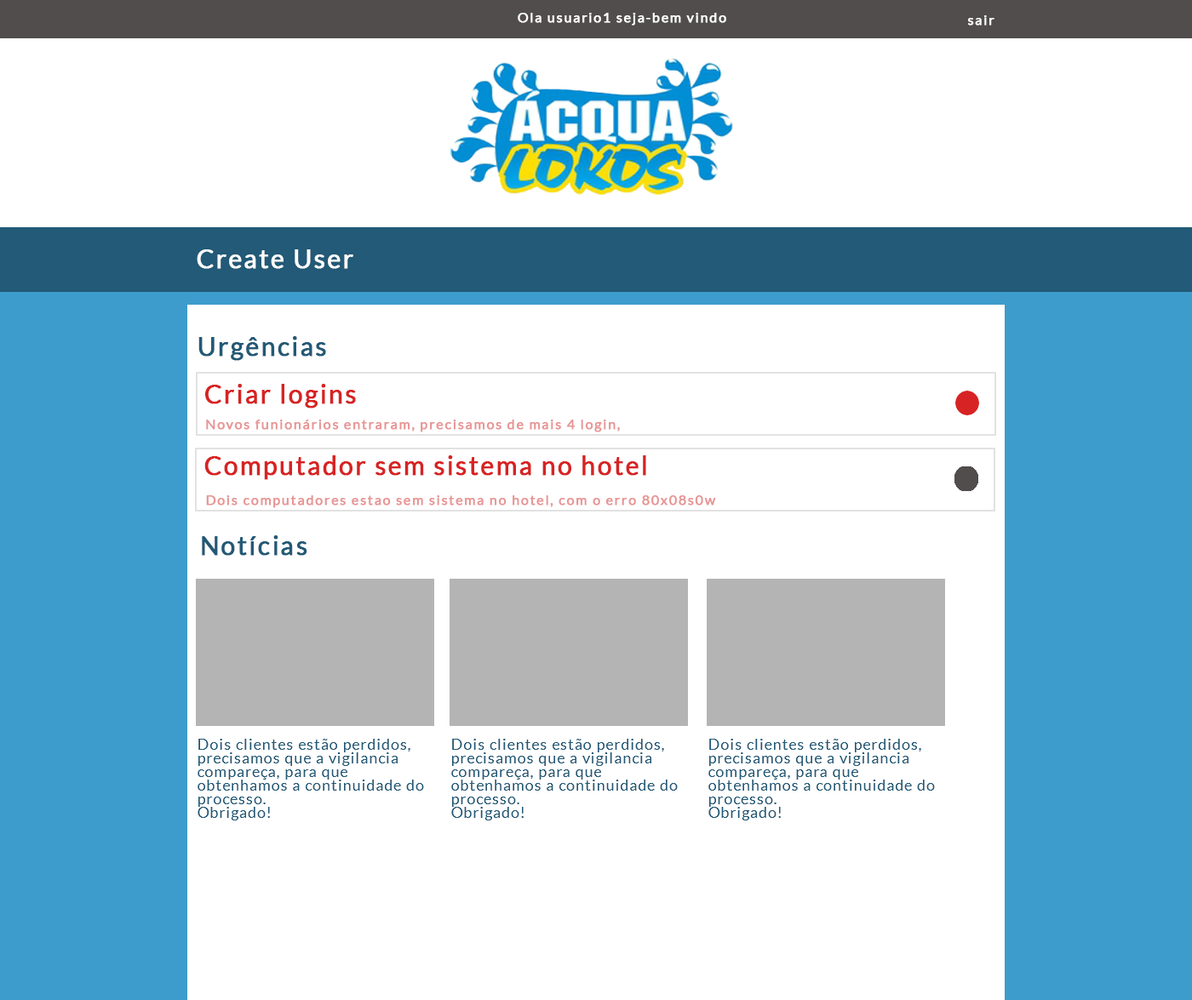
<style>
.page{position:relative;width:1192px;height:1000px;background:#ffffff}
.page>*{position:absolute;margin:0}
.t1{font:13.6px "Lato-Regular";letter-spacing:0.05em;color:#ffffff;font-weight:bold}
.t2{font:25.5px "Lato-Regular";letter-spacing:0.05em;color:#ffffff;font-weight:bold}
.t3{font:25.5px "Lato-Regular";letter-spacing:0.05em;color:#225976;font-weight:bold}
.t4{font:25.5px "Lato-Regular";letter-spacing:0.05em;color:#d72323;font-weight:bold}
.t5{font:13.6px "Lato-Regular";letter-spacing:0.05em;color:#e89595;font-weight:bold}
.t6{font:15.3px/13.6px "Lato-Regular";letter-spacing:0.05em;color:#225976}
</style>
<div class="page">
<p class="t1" style="left:518px;top:13px;width:208px;height:13px">Ola usuario1 seja-bem vindo</p>
<p class="t1" style="left:968px;top:15px;width:26px;height:11px">sair</p>
<p class="t2" style="left:197px;top:249px;width:156px;height:20px">Create User</p>
<p class="t3" style="left:198px;top:336px;width:128px;height:25px">Urgências</p>
<p class="t4" style="left:205px;top:384px;width:151px;height:25px">Criar logins</p>
<p class="t5" style="left:206px;top:420px;width:414px;height:13px">Novos funionários entraram, precisamos de mais 4 login,</p>
<p class="t4" style="left:204px;top:455px;width:442px;height:25px">Computador sem sistema no hotel</p>
<p class="t5" style="left:206px;top:496px;width:510px;height:12px">Dois computadores estao sem sistema no hotel, com o erro 80x08s0w</p>
<p class="t3" style="left:202px;top:536px;width:105px;height:20px">Notícias</p>
<p class="t6" style="left:198px;top:739px;width:226px;height:82px">Dois clientes estão perdidos, precisamos que a vigilancia compareça, para que obtenhamos a continuidade do processo.<br>Obrigado!</p>
<p class="t6" style="left:451px;top:739px;width:227px;height:82px">Dois clientes estão perdidos, precisamos que a vigilancia compareça, para que obtenhamos a continuidade do processo.<br>Obrigado!</p>
<p class="t6" style="left:708px;top:739px;width:227px;height:82px">Dois clientes estão perdidos, precisamos que a vigilancia compareça, para que obtenhamos a continuidade do processo.<br>Obrigado!</p>
</div>
